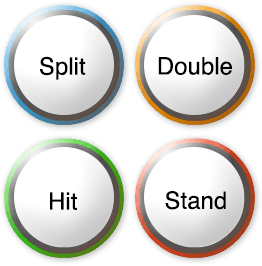
<style>
.page{position:relative;width:262px;height:266px;background:#ffffff}
.page>*{position:absolute;margin:0}
.t1{font:24px "Helvetica";color:#000000}
</style>
<div class="page">
<p class="t1" style="left:40px;top:56px;width:46px;height:24px">Split</p>
<p class="t1" style="left:158px;top:57px;width:74px;height:18px">Double</p>
<p class="t1" style="left:50px;top:192px;width:27px;height:18px">Hit</p>
<p class="t1" style="left:165px;top:191px;width:61px;height:19px">Stand</p>
</div>
